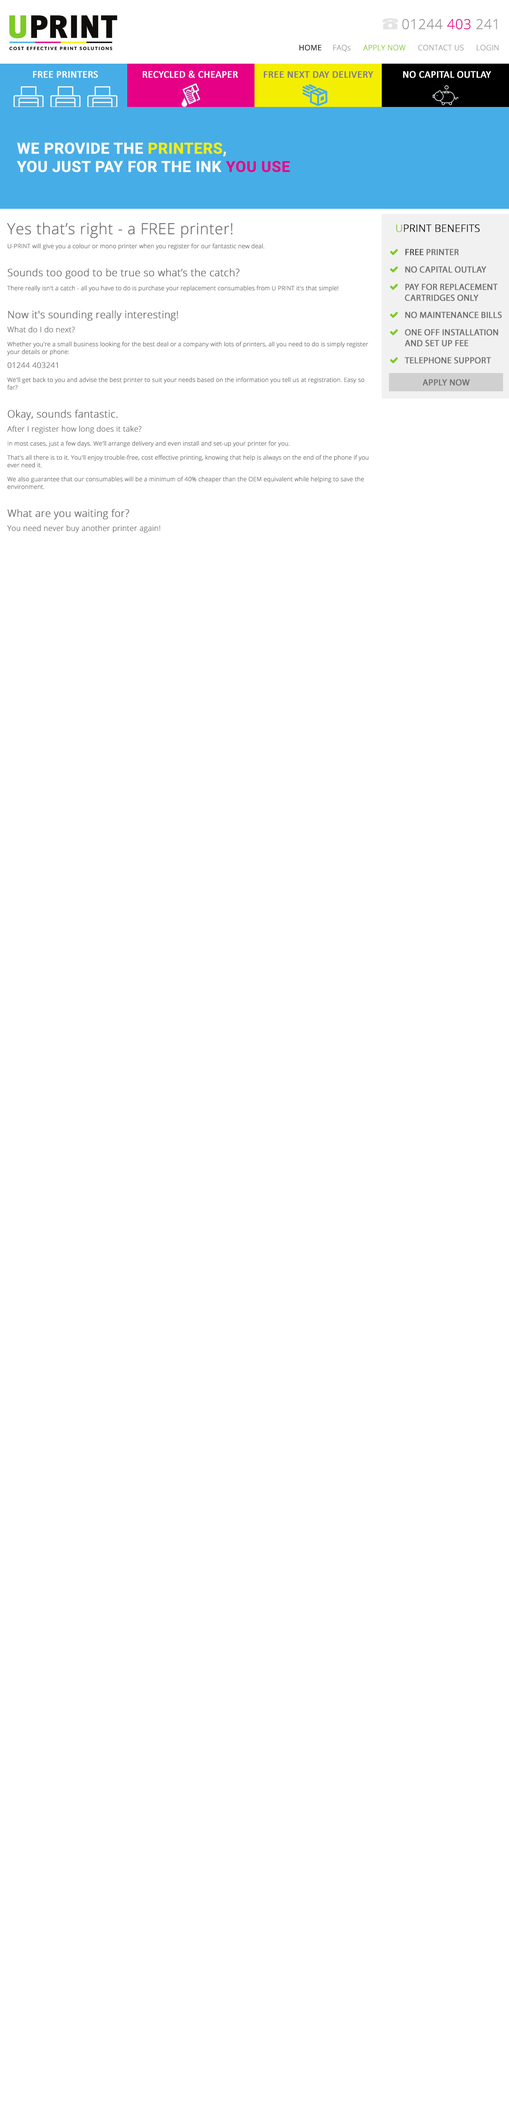
<style>
.page{position:relative;width:509px;height:2122px;background:#ffffff}
.page>*{position:absolute;margin:0}
.t1{font:13.8px "OpenSans-Light";color:#939393;font-weight:bold}
.t2{font:13.8px "OpenSans-Light";color:#e50086;font-weight:bold}
.t3{font:7.6px "OpenSans";color:#363636;font-weight:bold}
.t4{font:7.6px "OpenSans-Light";color:#9a9a9a;font-weight:bold}
.t5{font:7.6px "OpenSans-Light";color:#7fc927;font-weight:bold}
.t6{font:10.2px "Calibri";color:#ffffff;font-weight:bold}
.t7{font:10.2px "Calibri";color:#7e7e7e;font-weight:bold}
.t8{font:15.3px "Roboto-Bold";color:#fefefe;font-weight:bold}
.t9{font:15.3px "Roboto-Bold";color:#f4ee02;font-weight:bold}
.t10{font:15.3px "Roboto-Bold";color:#e50086;font-weight:bold}
.t11{font:5.9px/7.6px "OpenSans-Light";color:#6f6f6f;font-weight:bold}
.t12{font:15.3px/7.6px "OpenSans-Light";color:#6f6f6f;font-weight:bold}
.t13{font:10.2px/7.6px "OpenSans-Light";color:#6f6f6f;font-weight:bold}
.t14{font:7.6px/7.6px "OpenSans-Light";color:#6f6f6f;font-weight:bold}
.t15{font:10.2px "OpenSans-Light";color:#000000;font-weight:bold}
.t16{font:10.2px "OpenSans-Light";color:#7fc927;font-weight:bold}
.t17{font:9px "MyriadPro-Regular";color:#6f6f6f;font-weight:bold}
.t18{font:9px "MyriadPro-Regular";color:#4b4b4b;font-weight:bold}
</style>
<div class="page">
<p class="t1" style="left:402px;top:19px;width:95px;height:10px">01244 <span class="t2">403</span> 241</p>
<p class="t3" style="left:300px;top:45px;width:22px;height:5px">HOME</p>
<p class="t4" style="left:334px;top:45px;width:17px;height:7px">FAQs</p>
<p class="t5" style="left:363px;top:45px;width:43px;height:5px">APPLY NOW</p>
<p class="t4" style="left:418px;top:45px;width:46px;height:5px">CONTACT US</p>
<p class="t4" style="left:477px;top:45px;width:22px;height:5px">LOGIN</p>
<p class="t6" style="left:33px;top:71px;width:65px;height:7px">FREE PRINTERS</p>
<p class="t6" style="left:143px;top:70px;width:95px;height:8px">RECYCLED &amp; CHEAPER</p>
<p class="t7" style="left:264px;top:71px;width:109px;height:7px">FREE NEXT DAY DELIVERY</p>
<p class="t6" style="left:403px;top:71px;width:88px;height:7px">NO CAPITAL OUTLAY</p>
<p class="t8" style="left:17px;top:142px;width:273px;height:30px">WE PROVIDE THE <span class="t9">PRINTERS</span>,<br>YOU JUST PAY FOR THE INK <span class="t10">YOU USE</span></p>
<p class="t11" style="left:7px;top:222px;width:362px;height:311px"><span class="t12">Yes that’s right - a FREE printer!<br></span>U-PRINT will give you a colour or mono printer when you register for our fantastic new deal.<br><br><span class="t13">Sounds too good to be true so what’s the catch?<br></span>There really isn't a catch - all you have to do is purchase your replacement consumables from U PRINT it's that simple!<br><br><span class="t13">Now it's sounding really interesting!<br></span><span class="t14">What do I do next?<br></span>Whether you're a small business looking for the best deal or a company with lots of printers, all you need to do is simply register your details or phone:<br><span class="t14">01244 403241<br></span>We'll get back to you and advise the best printer to suit your needs based on the information you tell us at registration. Easy so far?<br><br><span class="t13">Okay, sounds fantastic.<br></span><span class="t14">After I register how long does it take?<br></span>In most cases, just a few days. We'll arrange delivery and even install and set-up your printer for you.<br>That's all there is to it. You'll enjoy trouble-free, cost effective printing, knowing that help is always on the end of the phone if you ever need it.<br>We also guarantee that our consumables will be a minimum of 40% cheaper than the OEM equivalent while helping to save the environment.<br><br><span class="t13">What are you waiting for?<br></span><span class="t14">You need never buy another printer again!</span></p>
<p class="t15" style="left:396px;top:224px;width:84px;height:8px"><span class="t16">U</span>PRINT BENEFITS</p>
<p class="t17" style="left:405px;top:249px;width:54px;height:6px"><span class="t18">FREE</span> PRINTER</p>
<p class="t17" style="left:405px;top:266px;width:82px;height:7px">NO CAPITAL OUTLAY</p>
<p class="t17" style="left:405px;top:283px;width:93px;height:18px">PAY FOR REPLACEMENT<br>CARTRIDGES ONLY</p>
<p class="t17" style="left:405px;top:311px;width:97px;height:7px">NO MAINTENANCE BILLS</p>
<p class="t17" style="left:405px;top:329px;width:94px;height:17px">ONE OFF INSTALLATION<br>AND SET UP FEE</p>
<p class="t17" style="left:405px;top:357px;width:86px;height:7px">TELEPHONE SUPPORT</p>
<p class="t17" style="left:423px;top:379px;width:47px;height:7px">APPLY NOW</p>
</div>
